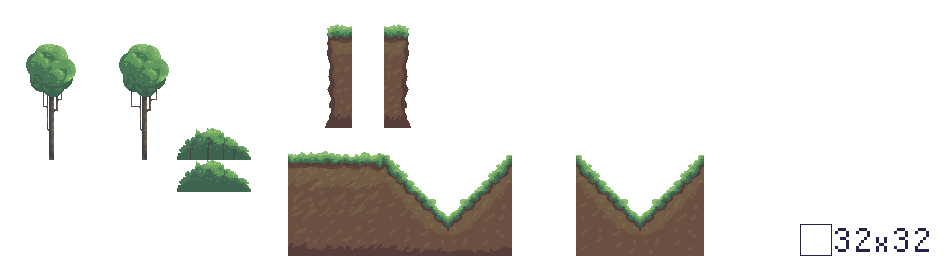
<style>
.page{position:relative;width:950px;height:256px;background:#ffffff}
.page>*{position:absolute;margin:0}
.t1{font:30px "Small Fonts";letter-spacing:0.1em;color:#2b2148;scale:0.92 1}
</style>
<div class="page">
<p class="t1" style="left:835px;top:228px;width:94px;height:24px">32x32</p>
</div>
